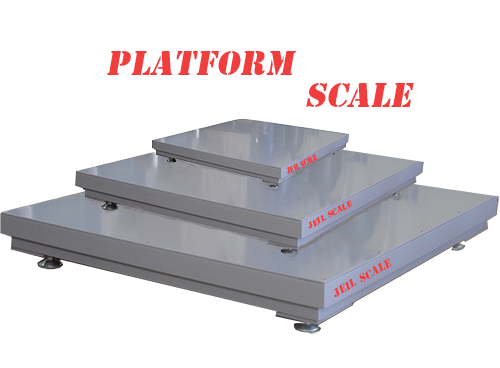
<style>
.page{position:relative;width:500px;height:368px;background:#ffffff}
.page>*{position:absolute;margin:0}
.t1{font:32px/32px "StencilStd";letter-spacing:0.025em;color:#f03e3e;font-style:italic}
.t2{font:8px "StencilStd";letter-spacing:0.025em;color:#f03e3e;font-style:italic}
.t3{font:10.7px "StencilStd";letter-spacing:0.025em;color:#f03e3e;font-style:italic}
</style>
<div class="page">
<p class="t1" style="left:107px;top:51px;width:307px;height:56px">pLatform<br>                 scale</p>
<p class="t2" style="left:308px;top:200px;width:45px;height:29px;rotate:-28deg">jeil scale</p>
<p class="t3" style="left:334px;top:258px;width:58px;height:40px;rotate:-29deg">jeil scale</p>
</div>
